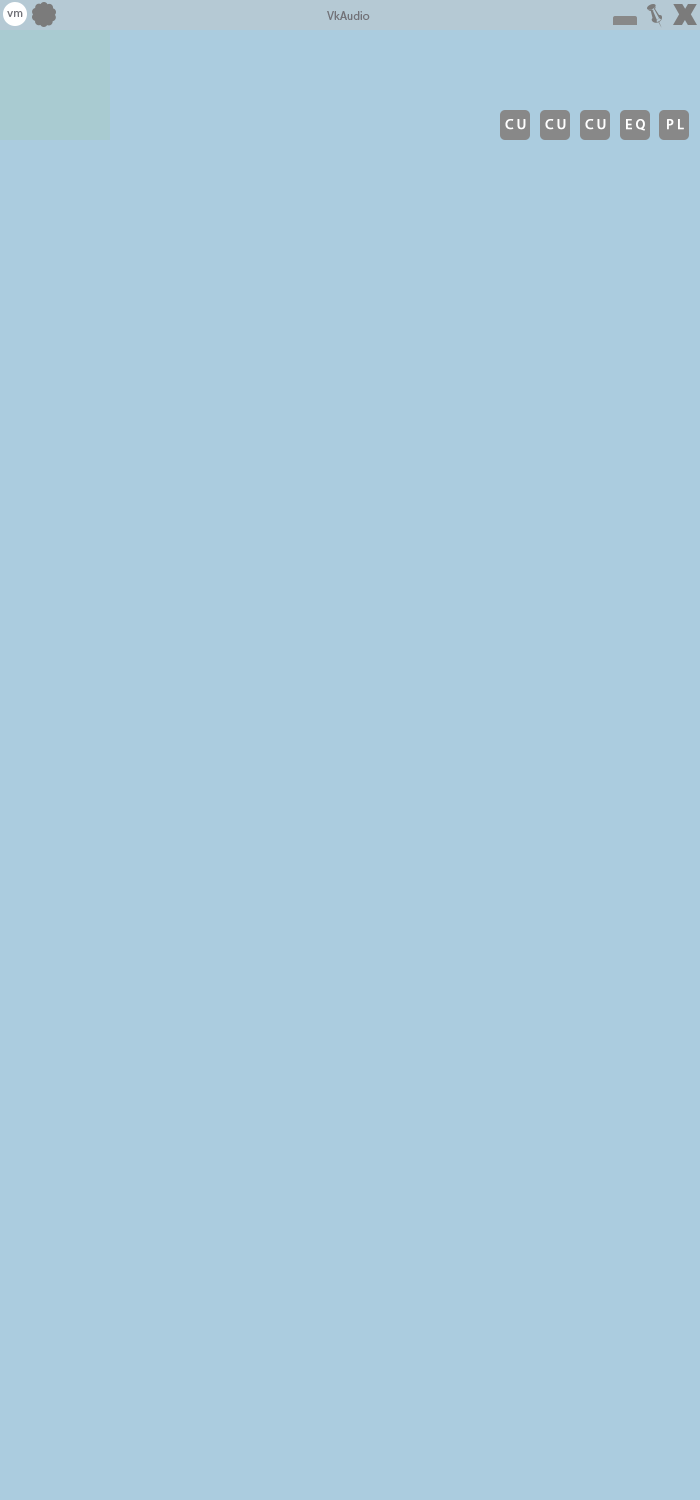
<style>
.page{position:relative;width:700px;height:1500px;background:#abccdf}
.page>*{position:absolute;margin:0}
.t1{font:12px "MyriadPro-Regular";color:#737379}
.t2{font:14px "MyriadPro-Regular";letter-spacing:0.24em;color:#ffffff;font-weight:bold}
</style>
<div class="page">
<p class="t1" style="left:7px;top:11px;width:16px;height:6px">vm</p>
<p class="t1" style="left:327px;top:11px;width:43px;height:9px">VkAudio</p>
<p class="t2" style="left:505px;top:119px;width:21px;height:11px">CU</p>
<p class="t2" style="left:545px;top:119px;width:21px;height:11px">CU</p>
<p class="t2" style="left:585px;top:119px;width:21px;height:11px">CU</p>
<p class="t2" style="left:626px;top:119px;width:19px;height:12px">EQ</p>
<p class="t2" style="left:667px;top:119px;width:17px;height:11px">PL</p>
</div>
